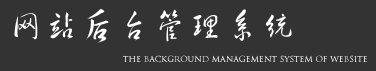
<style>
.page{position:relative;width:376px;height:71px;background:#333333}
.page>*{position:absolute;margin:0}
.t1{font:36px "FZHCJW--GB1-0";color:#ffffff}
.t2{font:8px "Catwoman"}
</style>
<div class="page">
<p class="t1" style="left:14px;top:9px;width:278px;height:34px">网站后台管理系统</p>
<p class="t2" style="left:123px;top:55px;width:244px;height:8px">the background management system of website</p>
</div>
